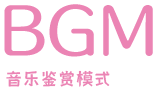
<style>
.page{position:relative;width:157px;height:88px;background:#ffffff}
.page>*{position:absolute;margin:0}
.t1{font:17.8px "shetumodengxiaofangti";color:#eb84b4}
</style>
<div class="page">
<p class="t1" style="left:6px;top:70px;width:104px;height:17px">音乐鉴赏模式</p>
</div>
